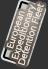
<style>
.page{position:relative;width:48px;height:69px;background:#333333}
.page>*{position:absolute;margin:0}
.t1{font:8px/8px "UDShinGoPro-Light";letter-spacing:-0.02em;color:#ebe7df;font-weight:bold}
</style>
<div class="page">
<p class="t1" style="left:6px;top:3px;width:38px;height:63px;text-align:center;rotate:-72deg">European<br>Expeditionary<br>Detention Fleet</p>
</div>
